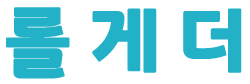
<style>
.page{position:relative;width:250px;height:84px;background:#ffffff}
.page>*{position:absolute;margin:0}
.t1{font:76.8px "GyeonggiTitleVOTF";letter-spacing:0.12em;color:#23b1c8;font-weight:bold}
</style>
<div class="page">
<p class="t1" style="left:6px;top:7px;width:236px;height:72px">롤게더</p>
</div>
